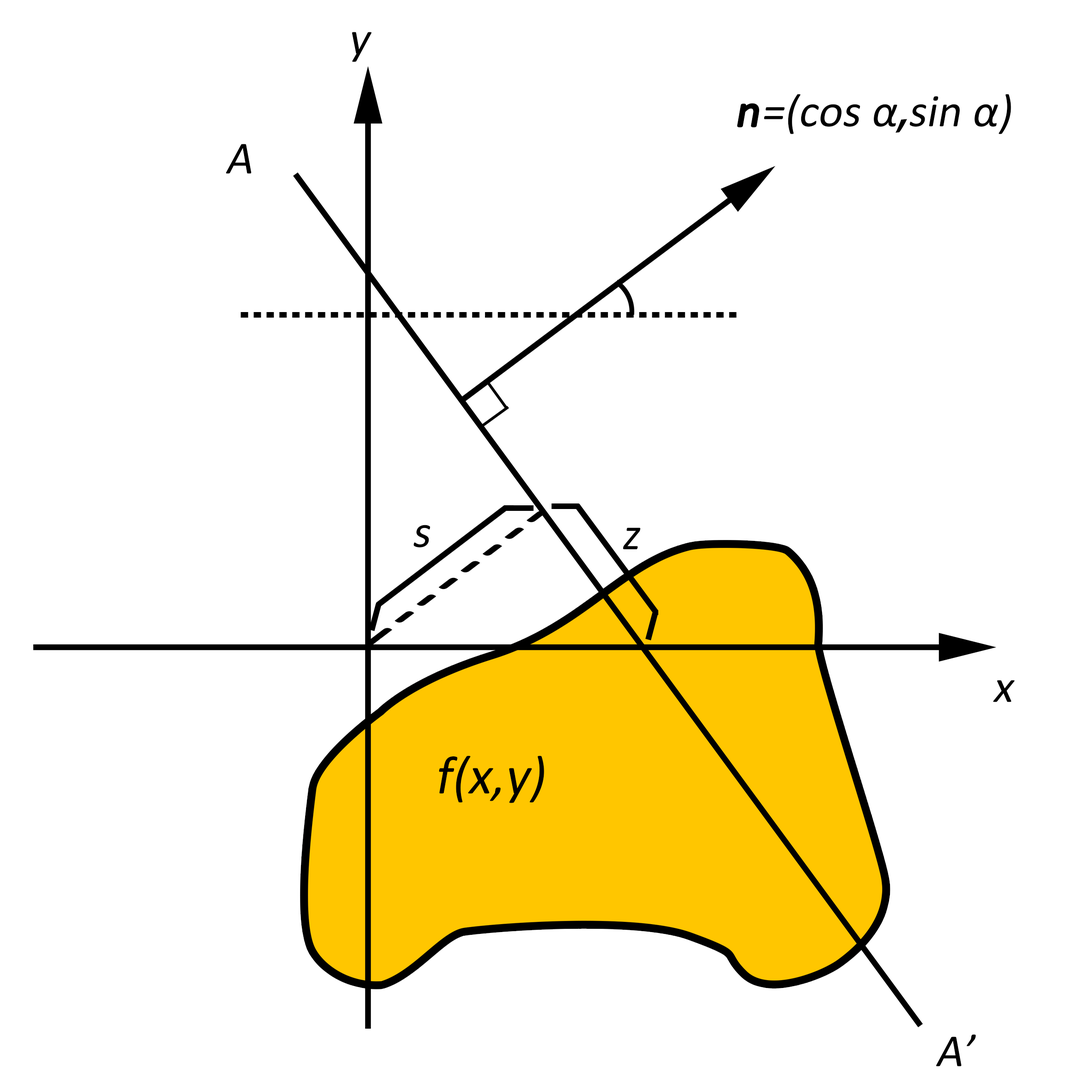
<style>
.page{position:relative;width:1092px;height:1092px;background:#ffffff}
.page>*{position:absolute;margin:0}
.t1{font:46.2px "Calibri";color:#000000;font-style:italic}
.t2{font:46.2px "Calibri";color:#000000;font-weight:bold;font-style:italic}
.t3{font:46.2px "AdobeHeitiStd-Regular";color:#000000;font-style:italic}
.t4{font:53.9px "Calibri";color:#000000;font-style:italic}
</style>
<div class="page">
<p class="t1" style="left:352px;top:32px;width:20px;height:30px">y</p>
<p class="t1" style="left:737px;top:94px;width:274px;height:40px"><span class="t2">n</span>=(cos α<span class="t3">,</span>sin α)</p>
<p class="t1" style="left:226px;top:144px;width:25px;height:30px">A</p>
<p class="t1" style="left:413px;top:525px;width:17px;height:22px">s</p>
<p class="t1" style="left:623px;top:528px;width:17px;height:21px">z</p>
<p class="t1" style="left:993px;top:680px;width:22px;height:22px">x</p>
<p class="t4" style="left:439px;top:755px;width:105px;height:48px">f(x,y)</p>
<p class="t1" style="left:936px;top:1034px;width:40px;height:33px">A’</p>
</div>
